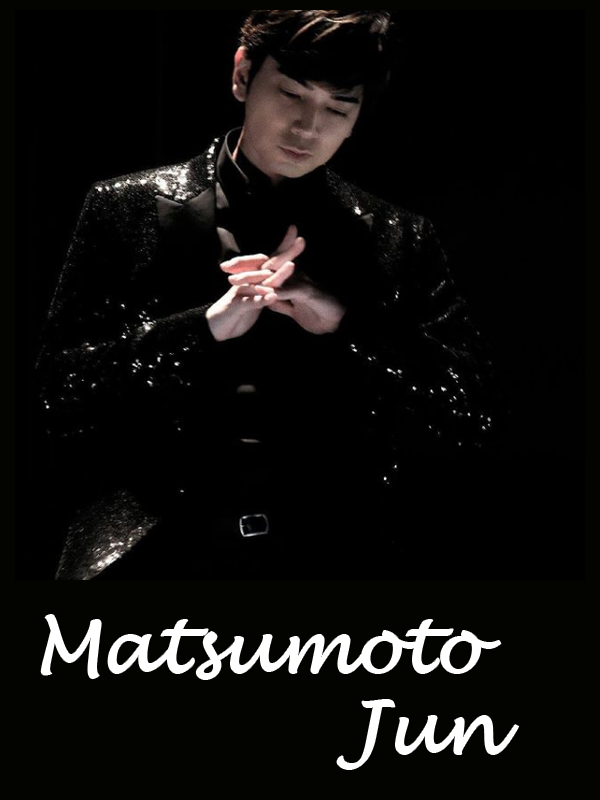
<style>
.page{position:relative;width:600px;height:800px;background:#000000}
.page>*{position:absolute;margin:0}
.t1{font:72px "LucidaHandwriting-Italic";color:#ffffff}
</style>
<div class="page">
<p class="t1" style="left:41px;top:615px;width:460px;height:64px">Matsumoto</p>
<p class="t1" style="left:337px;top:700px;width:182px;height:69px">Jun</p>
</div>
